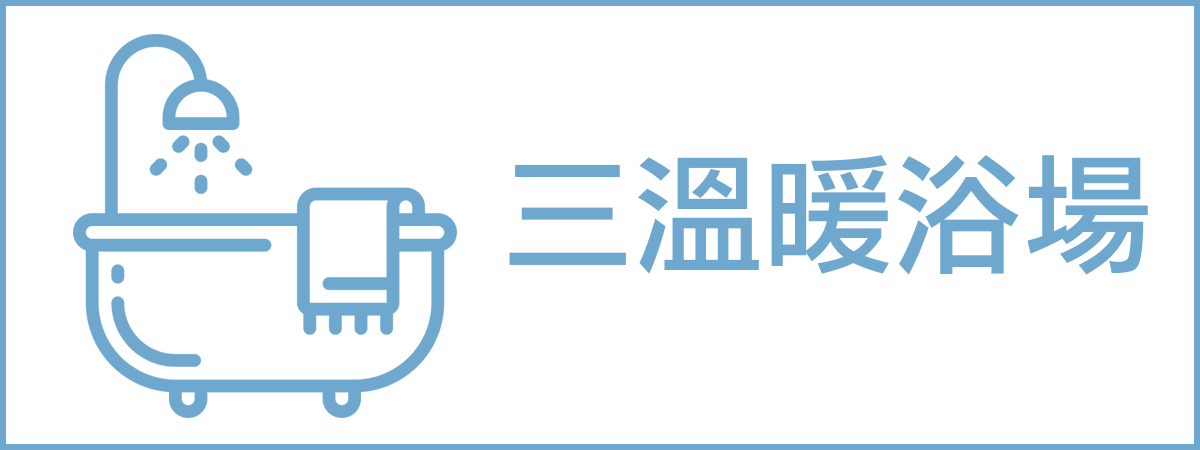
<style>
.page{position:relative;width:1200px;height:450px;background:#ffffff}
.page>*{position:absolute;margin:0}
.t1{font:130px "DFLiHeiStd-W5";color:#6ea8ce}
</style>
<div class="page">
<p class="t1" style="left:509px;top:155px;width:639px;height:120px">三溫暖浴場</p>
</div>
